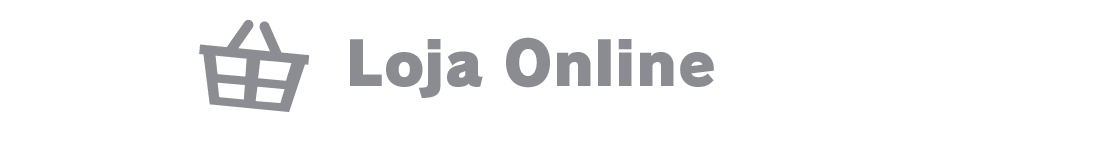
<style>
.page{position:relative;width:1110px;height:144px;background:#ffffff}
.page>*{position:absolute;margin:0}
.t1{font:60px "RodinPro-UB";letter-spacing:0.001em;color:#8b8c92}
</style>
<div class="page">
<p class="t1" style="left:350px;top:37px;width:364px;height:61px">Loja Online</p>
</div>
